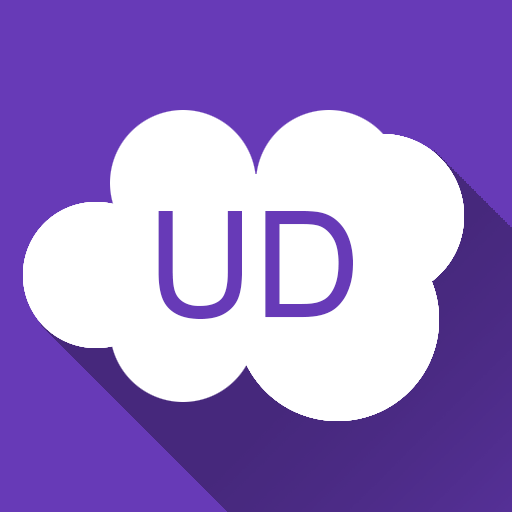
<style>
.page{position:relative;width:512px;height:512px;background:#673ab7}
.page>*{position:absolute;margin:0}
.t1{font:148px "ArialMT";color:#673ab7}
</style>
<div class="page">
<p class="t1" style="left:158px;top:211px;width:195px;height:108px">UD</p>
</div>
